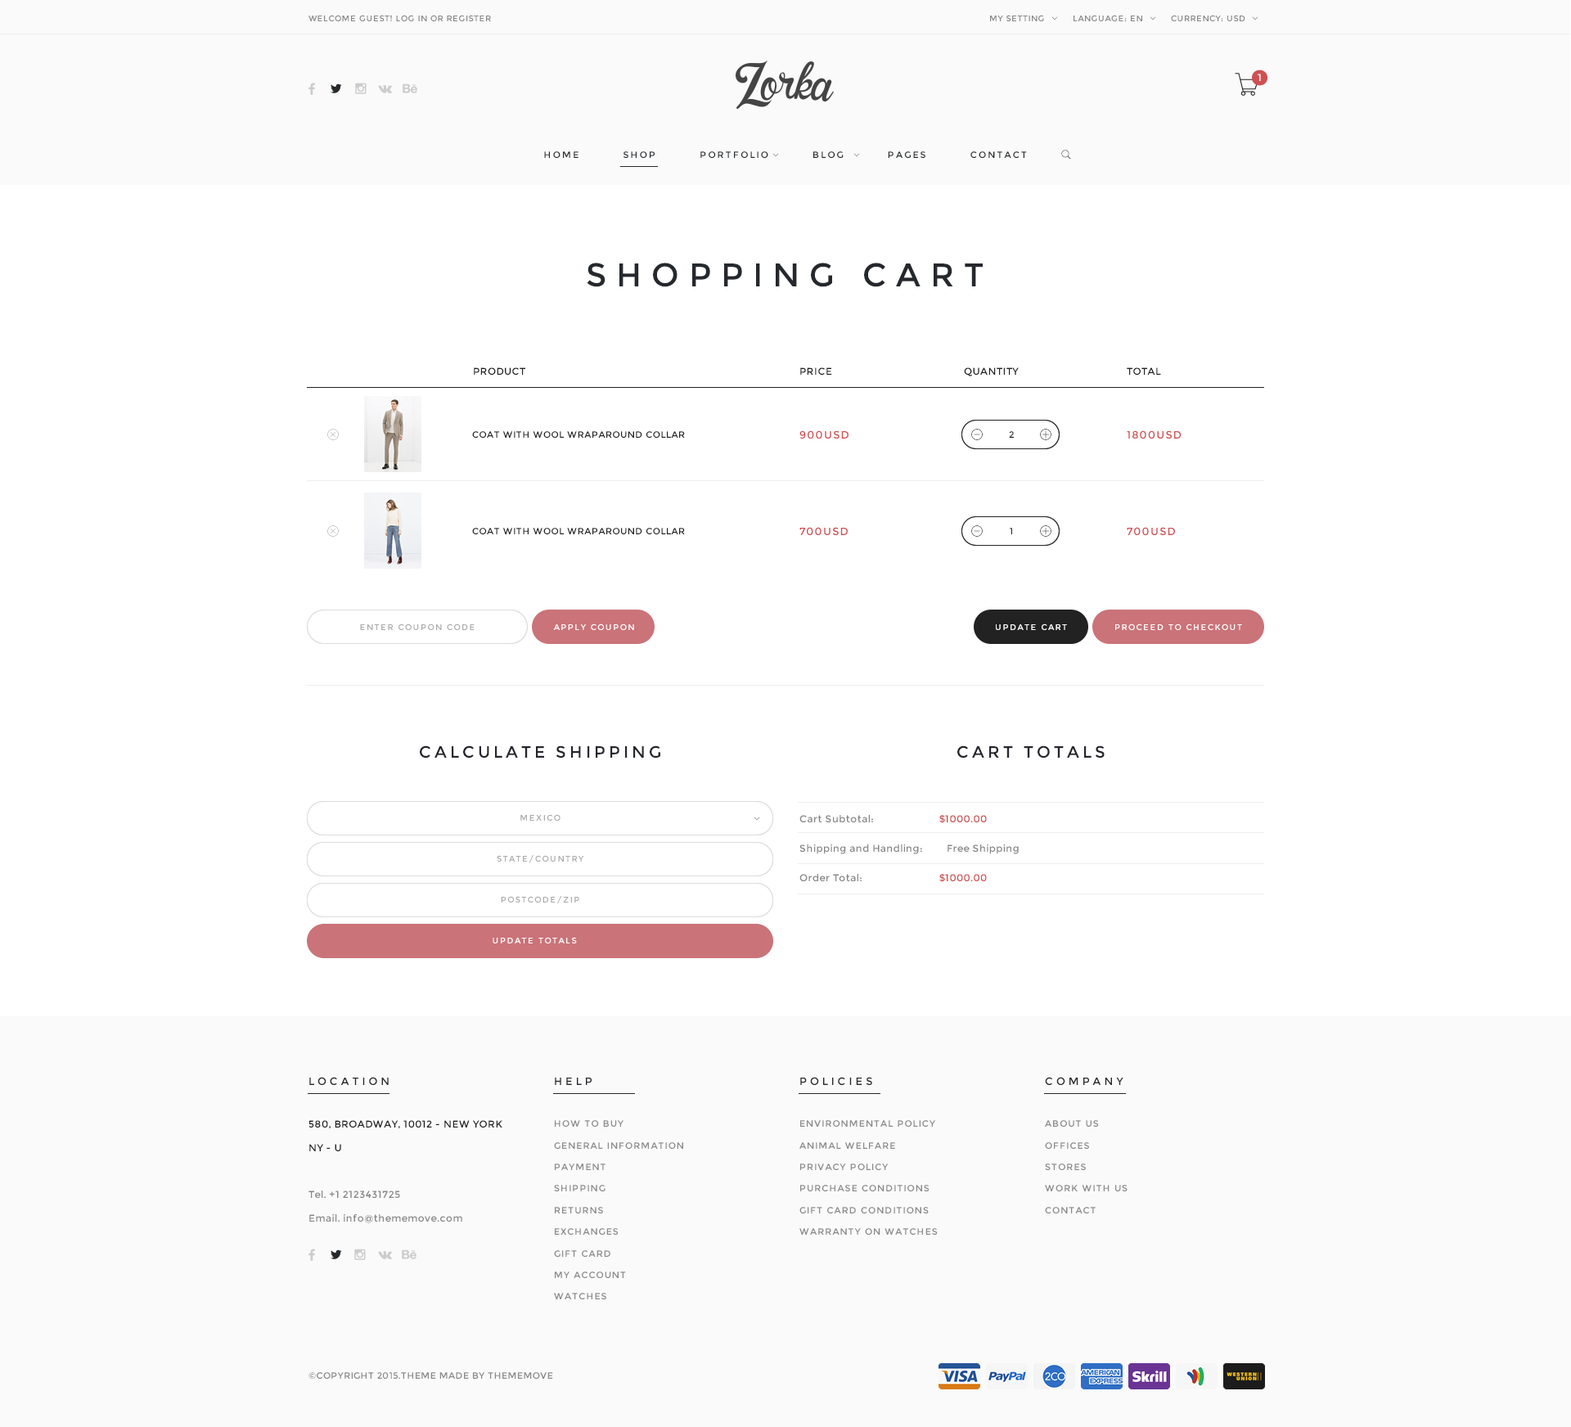
<style>
.page{position:relative;width:1571px;height:1427px;background:#ffffff}
.page>*{position:absolute;margin:0}
.t1{font:8.2px "Montserrat-Regular";letter-spacing:0.05em;color:#888888}
.t2{font:9.8px "Montserrat-Regular";letter-spacing:0.3em;color:#ffffff}
.t3{font:9px "Montserrat-Regular";letter-spacing:0.2em;color:#25292c}
.t4{font:32.7px "Montserrat-Regular";letter-spacing:0.3em;color:#25282c}
.t5{font:9.8px "Montserrat-Regular";letter-spacing:0.04em;color:#222222}
.t6{font:9.8px "Montserrat-Regular";letter-spacing:0.04em;color:#212121}
.t7{font:9px "Montserrat-Regular";letter-spacing:0.05em;color:#212121}
.t8{font:10.6px "Montserrat-Regular";letter-spacing:0.1em;color:#cf5053}
.t9{font:9px "Montserrat-Regular";letter-spacing:0.05em;color:#1f1f1f}
.t10{font:9px "Montserrat-Regular";letter-spacing:0.05em;color:#202020}
.t11{font:8.2px "Montserrat-Regular";letter-spacing:0.15em;color:#aaaaaa}
.t12{font:8.2px "Montserrat-Regular";letter-spacing:0.15em;color:#ffffff}
.t13{font:16.4px "Montserrat-Regular";letter-spacing:0.2em;color:#25262c}
.t14{font:9.8px/29.5px "Montserrat-Regular";letter-spacing:0.04em;color:#858585}
.t15{font:9.8px/29.5px "Montserrat-Regular";letter-spacing:0.04em;color:#ce5052}
.t16{font:10.6px "Montserrat-Regular";letter-spacing:0.3em;color:#25282c}
.t17{font:9.8px/23.6px "Montserrat-Regular";letter-spacing:0.04em;color:#868686}
.t18{font:9.8px/23.6px "Montserrat-Regular";letter-spacing:0.04em;color:#202020}
.t19{font:9px/21.6px "Montserrat-Regular";letter-spacing:0.1em;color:#888888}
.t20{font:9px/21.6px "Montserrat-Regular";letter-spacing:0.1em;color:#878787}
.t21{font:9px "Montserrat-Regular";letter-spacing:0.04em;color:#868686}
</style>
<div class="page">
<p class="t1" style="left:308px;top:15px;width:183px;height:6px">WELCOME GUEST! LOG IN OR REGISTER</p>
<p class="t1" style="left:990px;top:15px;width:54px;height:6px">MY SETTING</p>
<p class="t1" style="left:1073px;top:15px;width:69px;height:6px">LANGUAGE: EN</p>
<p class="t1" style="left:1171px;top:15px;width:74px;height:6px">CURRENCY: USD</p>
<p class="t2" style="left:1258px;top:74px;width:3px;height:7px">1</p>
<p class="t3" style="left:544px;top:151px;width:483px;height:7px">HOME          SHOP          PORTFOLIO          BLOG          PAGES          CONTACT</p>
<p class="t4" style="left:587px;top:263px;width:396px;height:24px">SHOPPING CART</p>
<p class="t5" style="left:474px;top:367px;width:51px;height:8px">PRODUCT</p>
<p class="t5" style="left:800px;top:367px;width:32px;height:8px">PRICE</p>
<p class="t6" style="left:964px;top:367px;width:55px;height:9px">QUANTITY</p>
<p class="t6" style="left:1127px;top:367px;width:34px;height:8px">TOTAL</p>
<p class="t7" style="left:472px;top:431px;width:213px;height:7px">COAT WITH WOOL WRAPAROUND COLLAR</p>
<p class="t8" style="left:799px;top:430px;width:49px;height:9px">900USD</p>
<p class="t9" style="left:1009px;top:431px;width:5px;height:7px">2</p>
<p class="t8" style="left:1127px;top:430px;width:54px;height:9px">1800USD</p>
<p class="t7" style="left:472px;top:528px;width:213px;height:6px">COAT WITH WOOL WRAPAROUND COLLAR</p>
<p class="t8" style="left:799px;top:527px;width:49px;height:8px">700USD</p>
<p class="t10" style="left:1010px;top:528px;width:2px;height:6px">1</p>
<p class="t8" style="left:1127px;top:527px;width:48px;height:8px">700USD</p>
<p class="t11" style="left:360px;top:623px;width:115px;height:7px">ENTER COUPON CODE</p>
<p class="t12" style="left:553px;top:623px;width:81px;height:7px">APPLY COUPON</p>
<p class="t12" style="left:996px;top:623px;width:71px;height:7px">UPDATE CART</p>
<p class="t12" style="left:1115px;top:623px;width:127px;height:7px">PROCEED TO CHECKOUT</p>
<p class="t13" style="left:420px;top:745px;width:240px;height:13px">CALCULATE SHIPPING</p>
<p class="t13" style="left:957px;top:745px;width:148px;height:13px">CART TOTALS</p>
<p class="t11" style="left:520px;top:814px;width:40px;height:7px">MEXICO</p>
<p class="t14" style="left:799px;top:815px;width:220px;height:67px">Cart Subtotal:                  <span class="t15"> $1000.00<br></span>Shipping and Handling: Free Shipping<br>Order Total:                <span class="t15">   $1000.00</span></p>
<p class="t11" style="left:497px;top:855px;width:87px;height:8px">STATE/COUNTRY</p>
<p class="t11" style="left:501px;top:896px;width:78px;height:8px">POSTCODE/ZIP</p>
<p class="t12" style="left:493px;top:937px;width:84px;height:6px">UPDATE TOTALS</p>
<p class="t16" style="left:309px;top:1077px;width:80px;height:8px">LOCATION</p>
<p class="t16" style="left:555px;top:1078px;width:37px;height:7px">HELP</p>
<p class="t16" style="left:800px;top:1077px;width:72px;height:8px">POLICIES</p>
<p class="t16" style="left:1045px;top:1077px;width:78px;height:8px">COMPANY</p>
<p class="t17" style="left:308px;top:1120px;width:194px;height:103px"><span class="t18">580, BROADWAY, 10012 - NEW YORK <br>NY - U<br><br></span>Tel. +1 2123431725<br>Email. info@thememove.com</p>
<p class="t19" style="left:554px;top:1120px;width:129px;height:179px">HOW TO BUY<br>GENERAL INFORMATION<br>PAYMENT<br>SHIPPING<br>RETURNS<br>EXCHANGES<br>GIFT CARD<br>MY ACCOUNT<br>WATCHES</p>
<p class="t19" style="left:799px;top:1120px;width:139px;height:115px">ENVIRONMENTAL POLICY<br>ANIMAL WELFARE<br>PRIVACY POLICY<br>PURCHASE CONDITIONS<br>GIFT CARD CONDITIONS<br>WARRANTY ON WATCHES</p>
<p class="t20" style="left:1045px;top:1120px;width:82px;height:93px">ABOUT US<br>OFFICES<br>STORES<br>WORK WITH US<br>CONTACT</p>
<p class="t21" style="left:308px;top:1372px;width:245px;height:7px">©COPYRIGHT 2015.THEME MADE BY THEMEMOVE</p>
</div>
